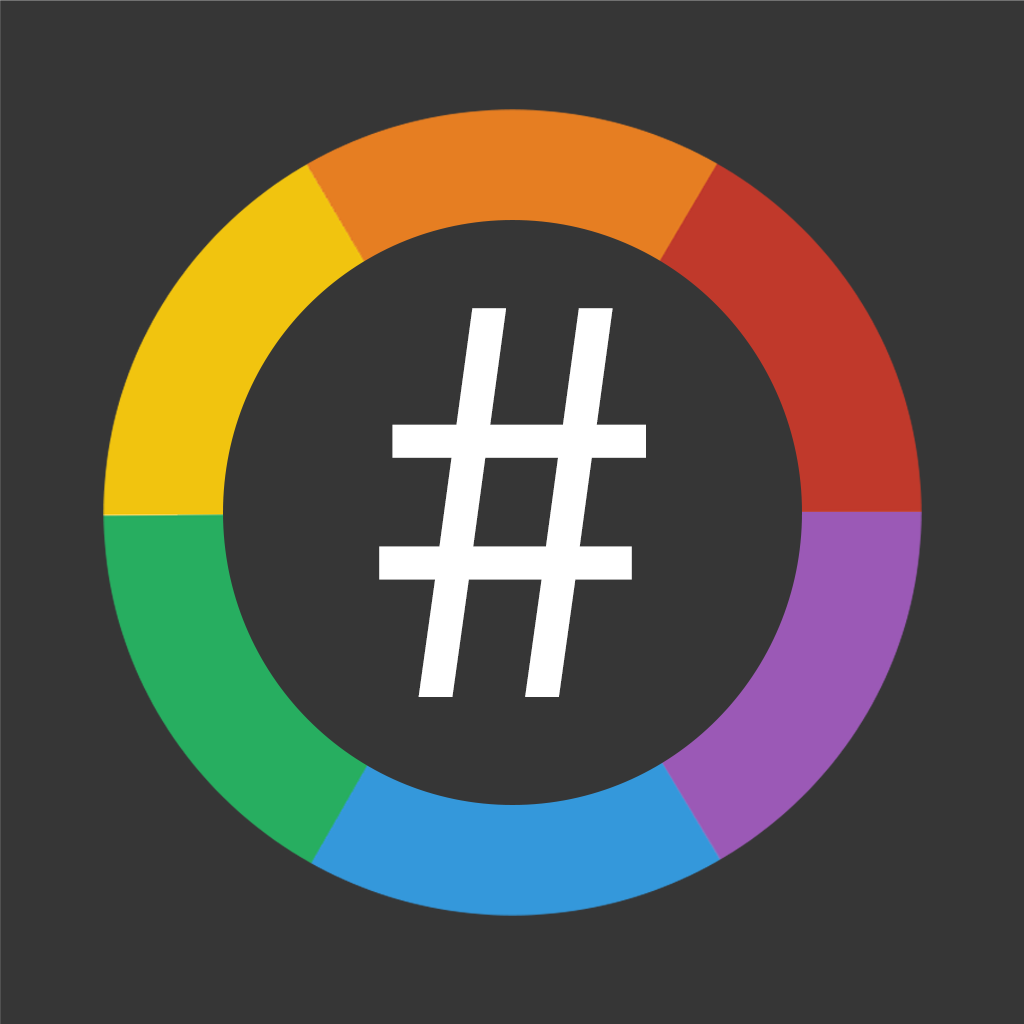
<style>
.page{position:relative;width:1024px;height:1024px;background:#363636}
.page>*{position:absolute;margin:0}
.t1{font:549.4px "Avenir-Book";color:#ffffff}
</style>
<div class="page">
<p class="t1" style="left:379px;top:308px;width:267px;height:389px">#</p>
</div>
